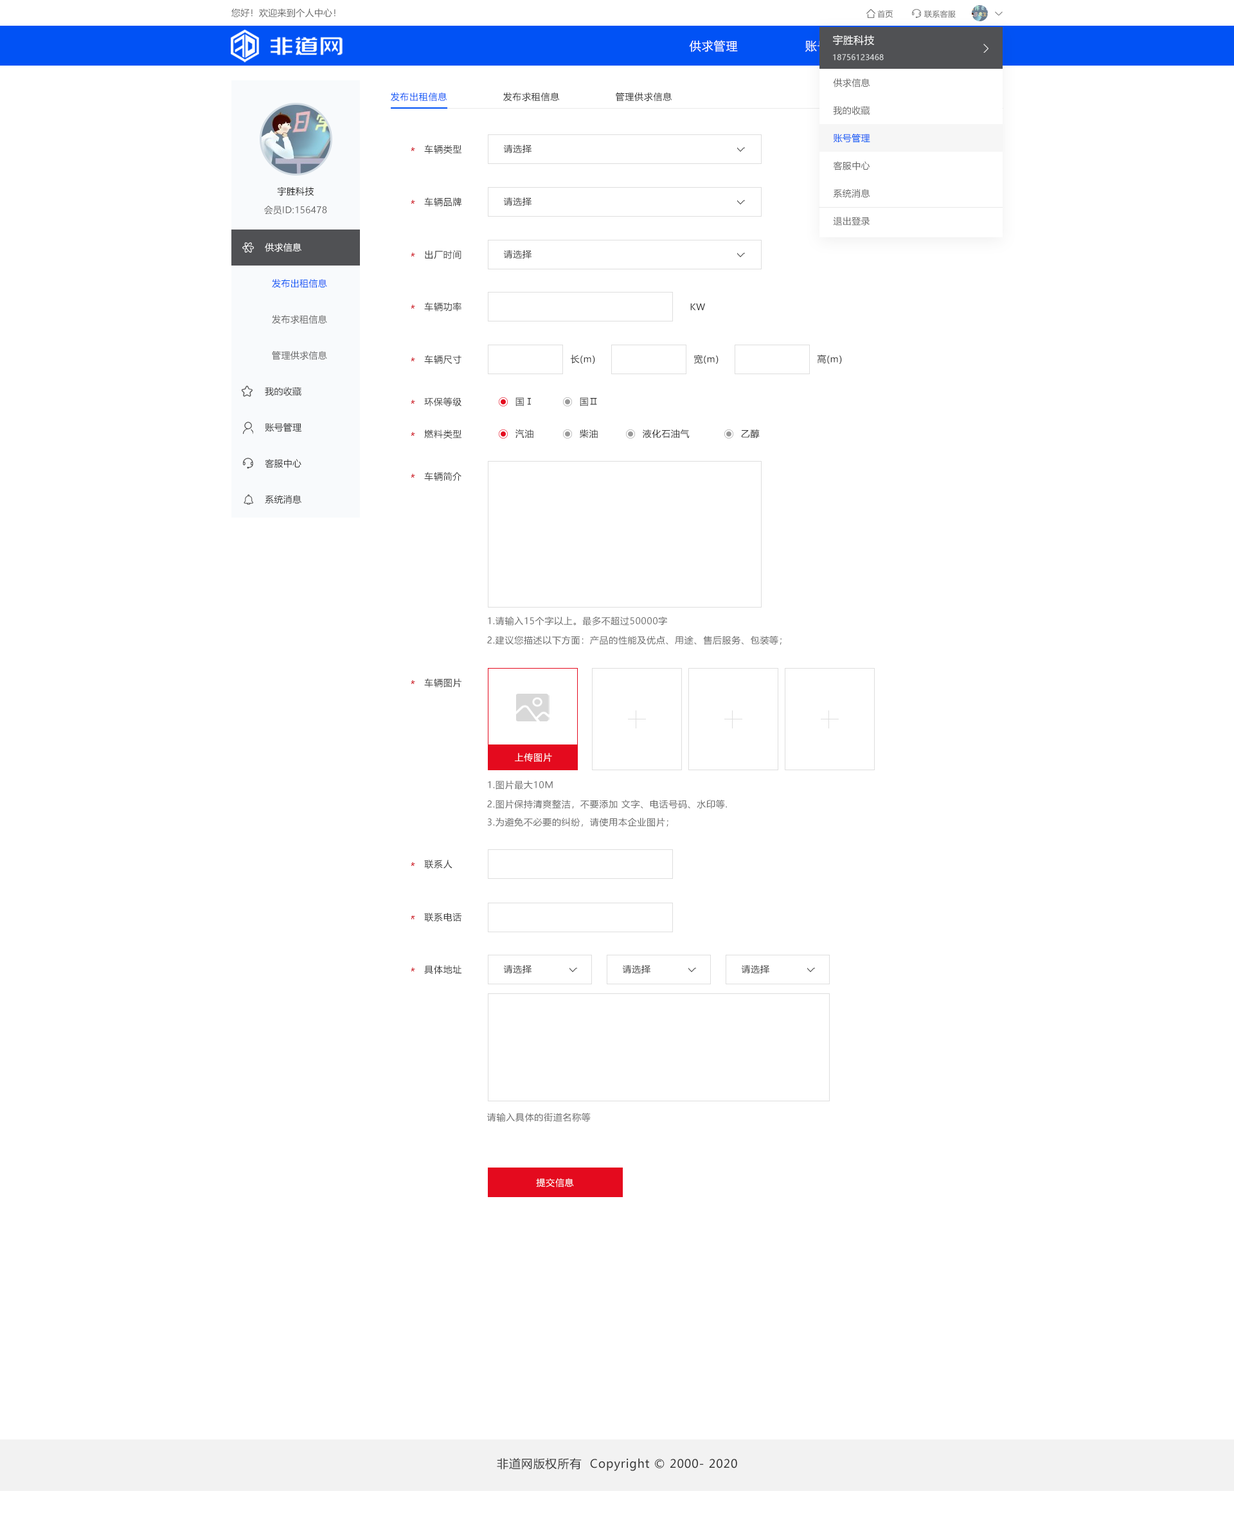
<style>
.page{position:relative;width:1234px;height:1534px;background:#ffffff}
.page>*{position:absolute;margin:0}
.t1{font:9px "MicrosoftYaHei";letter-spacing:0.022em;color:#666666}
.t2{font:7.7px "MicrosoftYaHei";letter-spacing:0.022em;color:#666666}
.t3{font:11.6px "MicrosoftYaHei";letter-spacing:0.05em;color:#ffffff}
.t4{font:11.6px "MicrosoftYaHei";letter-spacing:0.05em}
.t5{font:10.3px "MicrosoftYaHei";letter-spacing:0.022em;color:#ffffff}
.t6{font:7.7px "MicrosoftYaHei";letter-spacing:0.022em;color:#daddde}
.t7{font:9px "MicrosoftYaHei";letter-spacing:0.05em;color:#0152f5}
.t8{font:9px "MicrosoftYaHei";letter-spacing:0.05em;color:#333333}
.t9{font:9px "MicrosoftYaHei";letter-spacing:0.022em;color:#0152f5}
.t10{font:9px "MicrosoftYaHei";letter-spacing:0.022em;color:#141414}
.t11{font:9px "MicrosoftYaHei";letter-spacing:0.022em;color:#ffffff}
.t12{font:9px "MicrosoftYaHei";letter-spacing:0.022em;color:#333333}
.t13{font:9px "MicrosoftYaHei";letter-spacing:0.05em;color:#666666}
.t14{font:9px "MicrosoftYaHei";letter-spacing:0.05em;color:#ffffff}
.t15{font:9px "MicrosoftYaHei";letter-spacing:0.05em;color:#fefefe}
.t16{font:11.6px "MicrosoftYaHei";letter-spacing:0.05em;color:#333333}
</style>
<div class="page">
<p class="t1" style="left:231px;top:8px;width:105px;height:9px">您好！欢迎来到个人中心！</p>
<p class="t2" style="left:878px;top:10px;width:15px;height:8px">首页</p>
<p class="t2" style="left:924px;top:10px;width:32px;height:8px">联系客服</p>
<p class="t3" style="left:689px;top:40px;width:49px;height:12px">供求管理</p>
<p class="t4" style="left:806px;top:40px;width:48px;height:12px">账号管理</p>
<p class="t5" style="left:833px;top:35px;width:42px;height:11px">宇胜科技</p>
<p class="t6" style="left:833px;top:54px;width:51px;height:6px">18756123468</p>
<p class="t1" style="left:833px;top:78px;width:37px;height:9px">供求信息</p>
<p class="t7" style="left:391px;top:92px;width:56px;height:10px">发布出租信息</p>
<p class="t8" style="left:503px;top:92px;width:57px;height:10px">发布求租信息</p>
<p class="t8" style="left:616px;top:92px;width:56px;height:10px">管理供求信息</p>
<p class="t1" style="left:833px;top:106px;width:37px;height:9px">我的收藏</p>
<p class="t9" style="left:833px;top:134px;width:37px;height:9px">账号管理</p>
<p class="t8" style="left:424px;top:145px;width:38px;height:9px">车辆类型</p>
<p class="t8" style="left:503px;top:145px;width:29px;height:8px">请选择</p>
<p class="t1" style="left:833px;top:161px;width:37px;height:9px">客服中心</p>
<p class="t10" style="left:277px;top:186px;width:37px;height:10px">宇胜科技</p>
<p class="t8" style="left:424px;top:197px;width:38px;height:9px">车辆品牌</p>
<p class="t8" style="left:503px;top:197px;width:29px;height:9px">请选择</p>
<p class="t1" style="left:833px;top:189px;width:37px;height:9px">系统消息</p>
<p class="t1" style="left:264px;top:206px;width:63px;height:9px">会员ID:156478</p>
<p class="t1" style="left:833px;top:217px;width:37px;height:9px">退出登录</p>
<p class="t11" style="left:265px;top:243px;width:37px;height:9px">供求信息</p>
<p class="t8" style="left:425px;top:250px;width:37px;height:9px">出厂时间</p>
<p class="t8" style="left:503px;top:250px;width:29px;height:8px">请选择</p>
<p class="t9" style="left:272px;top:279px;width:55px;height:9px">发布出租信息</p>
<p class="t8" style="left:424px;top:302px;width:38px;height:9px">车辆功率</p>
<p class="t8" style="left:690px;top:303px;width:15px;height:7px">KW</p>
<p class="t1" style="left:272px;top:315px;width:55px;height:9px">发布求租信息</p>
<p class="t1" style="left:272px;top:351px;width:55px;height:9px">管理供求信息</p>
<p class="t8" style="left:424px;top:355px;width:38px;height:9px">车辆尺寸</p>
<p class="t8" style="left:570px;top:354px;width:25px;height:10px">长(m)</p>
<p class="t8" style="left:694px;top:354px;width:25px;height:10px">宽(m)</p>
<p class="t8" style="left:817px;top:354px;width:25px;height:10px">高(m)</p>
<p class="t12" style="left:265px;top:387px;width:37px;height:9px">我的收藏</p>
<p class="t8" style="left:424px;top:397px;width:38px;height:9px">环保等级</p>
<p class="t8" style="left:516px;top:397px;width:15px;height:9px">国Ⅰ</p>
<p class="t8" style="left:580px;top:397px;width:17px;height:9px">国Ⅱ</p>
<p class="t12" style="left:265px;top:423px;width:37px;height:9px">账号管理</p>
<p class="t8" style="left:424px;top:429px;width:38px;height:9px">燃料类型</p>
<p class="t8" style="left:516px;top:429px;width:18px;height:9px">汽油</p>
<p class="t8" style="left:579px;top:429px;width:19px;height:9px">柴油</p>
<p class="t8" style="left:643px;top:429px;width:47px;height:9px">液化石油气</p>
<p class="t8" style="left:741px;top:429px;width:19px;height:9px">乙醇</p>
<p class="t12" style="left:265px;top:459px;width:37px;height:9px">客服中心</p>
<p class="t8" style="left:424px;top:472px;width:38px;height:9px">车辆简介</p>
<p class="t12" style="left:265px;top:495px;width:37px;height:9px">系统消息</p>
<p class="t13" style="left:488px;top:616px;width:179px;height:10px">1.请输入15个字以上。最多不超过50000字</p>
<p class="t13" style="left:487px;top:636px;width:295px;height:9px">2.建议您描述以下方面：产品的性能及优点、用途、售后服务、包装等；</p>
<p class="t8" style="left:424px;top:678px;width:38px;height:9px">车辆图片</p>
<p class="t14" style="left:515px;top:753px;width:37px;height:9px">上传图片</p>
<p class="t13" style="left:488px;top:780px;width:65px;height:9px">1.图片最大10M</p>
<p class="t13" style="left:487px;top:800px;width:240px;height:9px">2.图片保持清爽整洁，不要添加 文字、电话号码、水印等.</p>
<p class="t13" style="left:487px;top:818px;width:182px;height:9px">3.为避免不必要的纠纷，请使用本企业图片；</p>
<p class="t8" style="left:424px;top:860px;width:29px;height:9px">联系人</p>
<p class="t8" style="left:424px;top:912px;width:38px;height:10px">联系电话</p>
<p class="t8" style="left:424px;top:965px;width:38px;height:9px">具体地址</p>
<p class="t8" style="left:503px;top:965px;width:29px;height:8px">请选择</p>
<p class="t8" style="left:622px;top:965px;width:29px;height:8px">请选择</p>
<p class="t8" style="left:741px;top:965px;width:29px;height:8px">请选择</p>
<p class="t13" style="left:487px;top:1113px;width:104px;height:9px">请输入具体的街道名称等</p>
<p class="t15" style="left:536px;top:1178px;width:38px;height:9px">提交信息</p>
<p class="t16" style="left:497px;top:1457px;width:240px;height:14px">非道网版权所有  Copyright © 2000- 2020</p>
</div>
